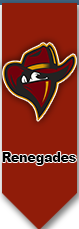
<style>
.page{position:relative;width:79px;height:229px;background:#901c09}
.page>*{position:absolute;margin:0}
.t1{font:12.5px "Arial-Black";letter-spacing:-0.01em;color:#000000}
</style>
<div class="page">
<p class="t1" style="left:2px;top:152px;width:74px;height:13px">Renegades</p>
</div>
